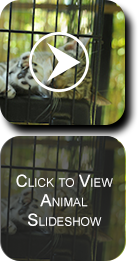
<style>
.page{position:relative;width:139px;height:271px}
.page>*{position:absolute;margin:0}
.t1{font:16.7px/19.4px "ArialMT";color:#ffffff;font-variant:small-caps}
</style>
<div class="page">
<p class="t1" style="left:16px;top:174px;width:97px;height:52px;text-align:center">Click to View Animal Slideshow</p>
</div>
